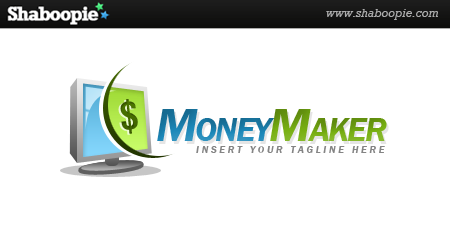
<style>
.page{position:relative;width:450px;height:250px;background:#ffffff}
.page>*{position:absolute;margin:0}
.t1{font:37.5px "Helvetica-Condensed-Bold";letter-spacing:-0.05em;color:#476e00}
.t2{font:33.7px "FranklinGothic-DemiItalic";letter-spacing:-0.05em;color:#1c88b9;text-transform:uppercase}
.t3{font:48.2px "FranklinGothic-DemiItalic";letter-spacing:-0.05em;color:#1c88b9}
.t4{font:48.2px "FranklinGothic-DemiItalic";letter-spacing:-0.05em;color:#78b012}
.t5{font:33.7px "FranklinGothic-DemiItalic";letter-spacing:-0.05em;color:#78b012;text-transform:uppercase}
.t6{font:9.6px "FranklinGothic-DemiItalic";letter-spacing:0.308em;color:#848484}
</style>
<div class="page">
<p class="t1" style="left:120px;top:99px;width:18px;height:35px;rotate:-6deg">$</p>
<p class="t2" style="left:157px;top:109px;width:230px;height:32px"><span class="t3">M</span>oney<span class="t4">M</span><span class="t5">aker</span></p>
<p class="t6" style="left:196px;top:146px;width:189px;height:7px">INSERT YOUR TAGLINE HERE</p>
</div>
